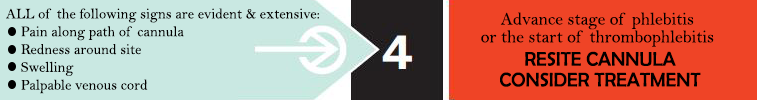
<style>
.page{position:relative;width:757px;height:100px;background:#c9e8e2}
.page>*{position:absolute;margin:0}
.t1{font:14.8px/17.8px "BellMT";color:#020000}
.t2{font:17.8px/17.8px "BellMT";color:#020000}
.t3{font:19.8px/20.8px "BerlinSansFB-Reg";color:#020000}
</style>
<div class="page">
<p class="t1" style="left:6px;top:8px;width:313px;height:86px">ALL of the following signs are evident &amp; extensive:<br>    Pain along path of cannula<br>    Redness around site<br>    Swelling<br>    Palpable venous cord</p>
<p class="t2" style="left:481px;top:12px;width:233px;height:35px;text-align:center">Advance stage of phlebitis<br>or the start of thrombophlebitis</p>
<p class="t3" style="left:500px;top:51px;width:201px;height:36px;text-align:center">RESITE CANNULA<br>CONSIDER TREATMENT</p>
</div>
